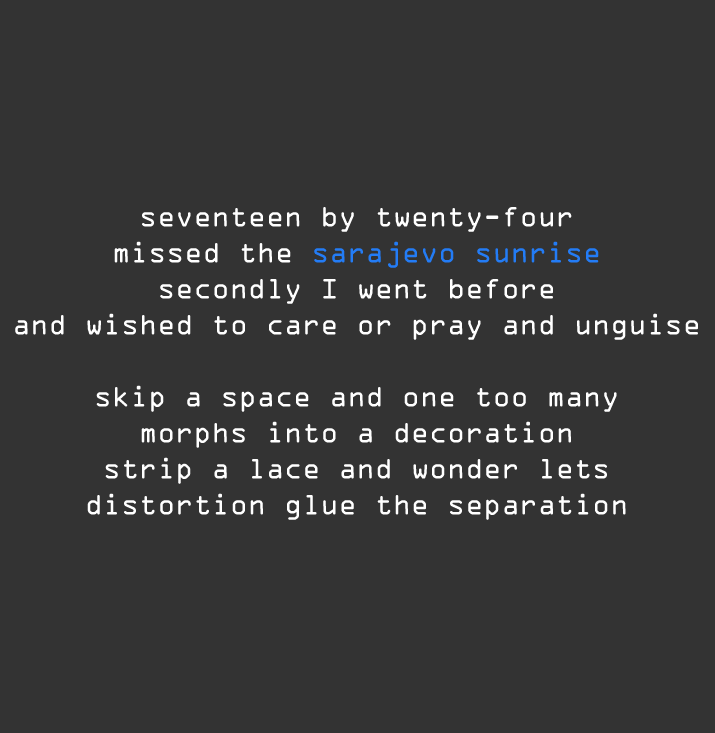
<style>
.page{position:relative;width:715px;height:733px;background:#333333}
.page>*{position:absolute;margin:0}
.t1{font:30px "OCRAExtended";color:#ffffff}
.t2{font:30px "OCRAExtended";color:#237cf6}
</style>
<div class="page">
<p class="t1" style="left:15px;top:207px;width:683px;height:313px;text-align:center">seventeen by twenty-four<br>missed the <span class="t2">sarajevo sunrise<br></span>secondly I went before<br>and wished to care or pray and unguise<br><br>skip a space and one too many<br>morphs into a decoration<br>strip a lace and wonder lets<br>distortion glue the separation</p>
</div>
